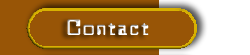
<style>
.page{position:relative;width:250px;height:55px;background:#985506}
.page>*{position:absolute;margin:0}
.t1{font:24px "Westminster";letter-spacing:0.1em}
</style>
<div class="page">
<p class="t1" style="left:67px;top:19px;width:82px;height:16px">Contact</p>
</div>
